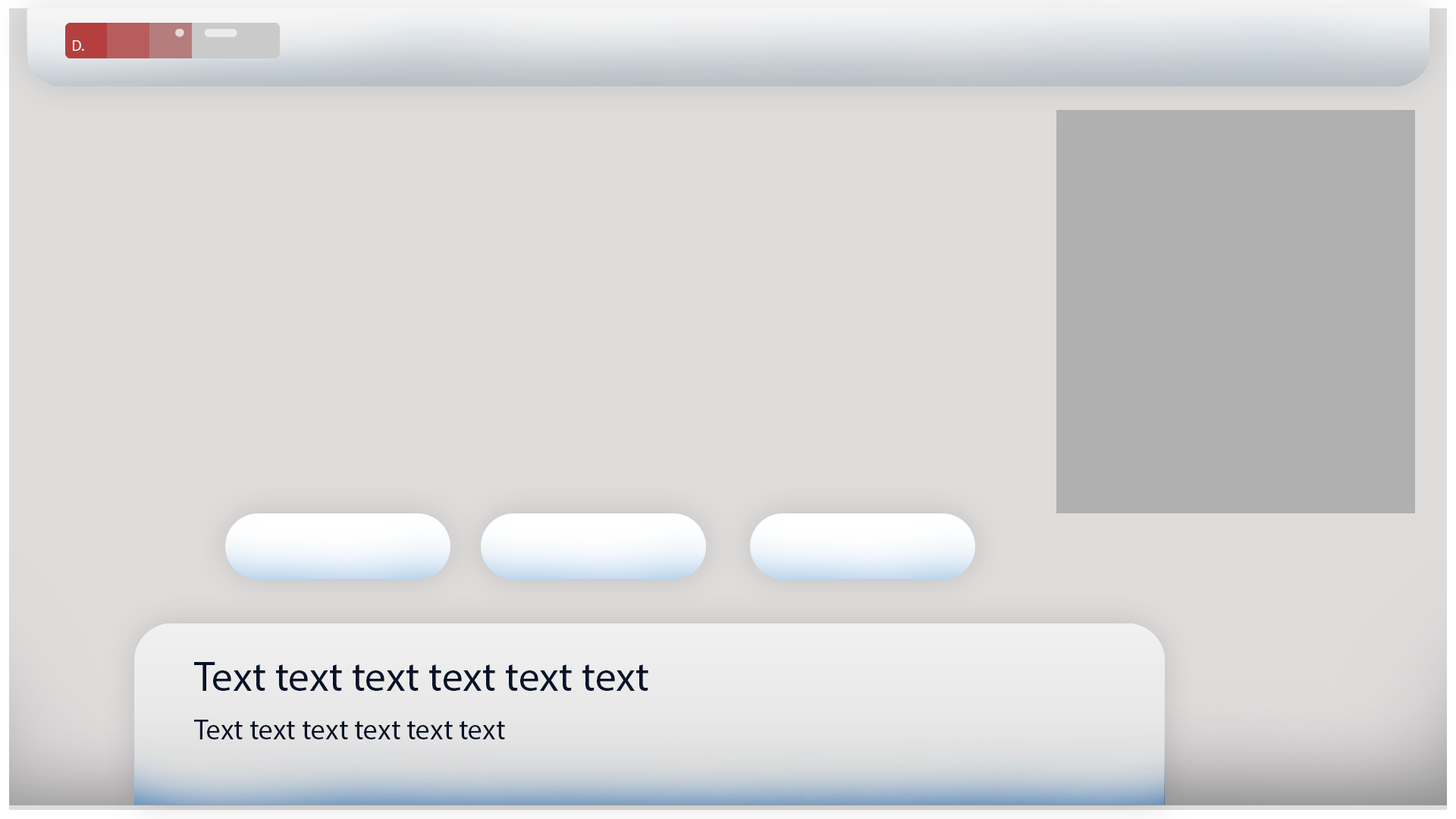
<style>
.page{position:relative;width:1456px;height:819px;background:#dfdcdc}
.page>*{position:absolute;margin:0}
.t1{font:15.2px "MyriadPro-Regular";color:#ffffff}
.t2{font:41.6px "MyriadPro-Regular";color:#071228}
.t3{font:28.4px "MyriadPro-Regular";color:#071228}
</style>
<div class="page">
<p class="t1" style="left:73px;top:40px;width:11px;height:11px">D.</p>
<p class="t2" style="left:194px;top:662px;width:454px;height:29px">Text text text text text text</p>
<p class="t3" style="left:194px;top:720px;width:311px;height:19px">Text text text text text text</p>
</div>
